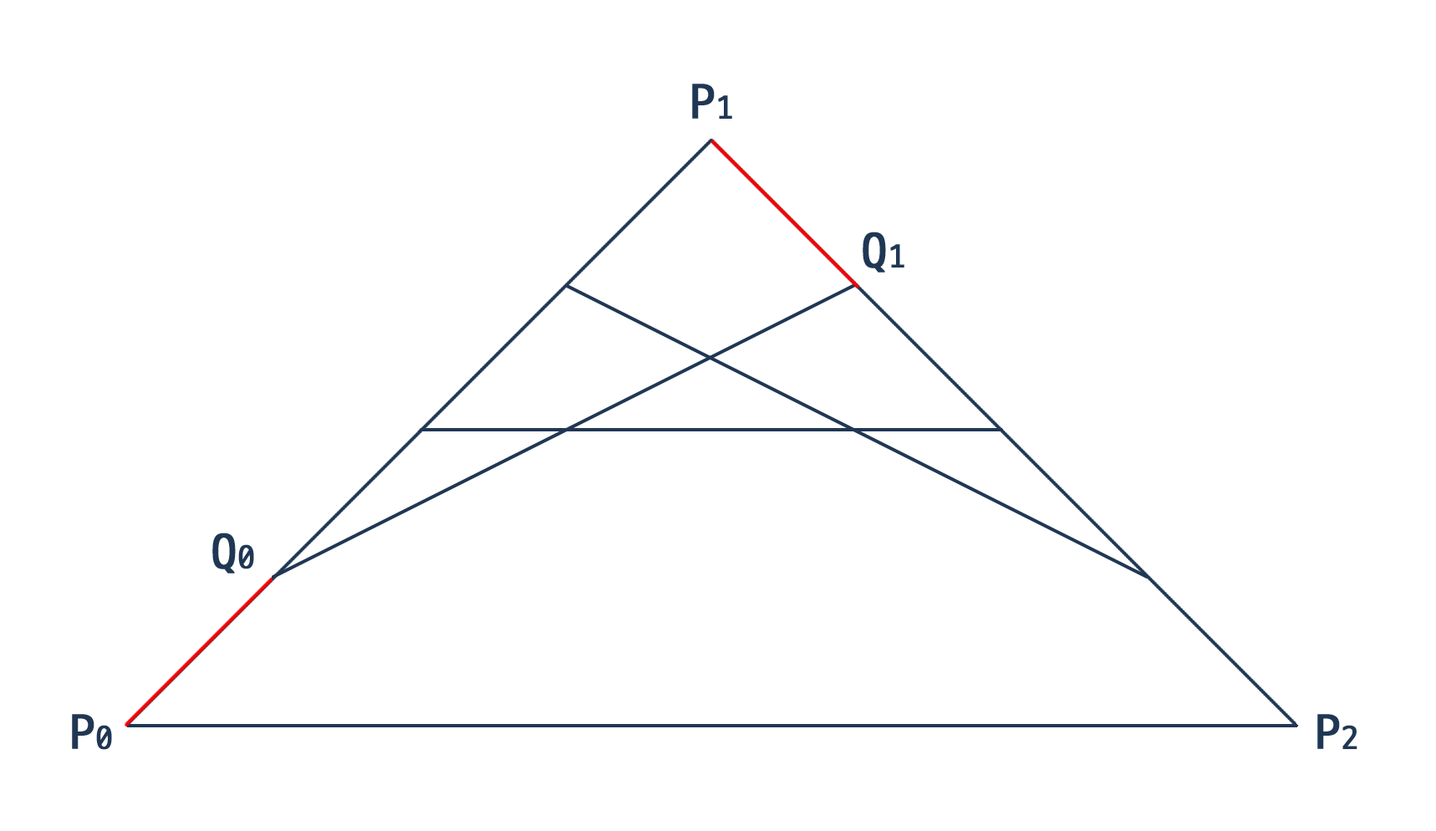
<style>
.page{position:relative;width:1436px;height:831px;background:#ffffff}
.page>*{position:absolute;margin:0}
.t1{font:50.1px "D2Coding";color:#203754;font-weight:bold}
.t2{font:33.4px "D2Coding";color:#203754;font-weight:bold}
</style>
<div class="page">
<p class="t1" style="left:692px;top:84px;width:40px;height:35px">P<span class="t2">1</span></p>
<p class="t1" style="left:862px;top:231px;width:42px;height:41px">Q<span class="t2">1</span></p>
<p class="t1" style="left:212px;top:532px;width:42px;height:41px">Q<span class="t2">0</span></p>
<p class="t1" style="left:72px;top:714px;width:40px;height:36px">P<span class="t2">0</span></p>
<p class="t1" style="left:1317px;top:714px;width:40px;height:35px">P<span class="t2">2</span></p>
</div>
